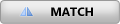
<style>
.page{position:relative;width:120px;height:24px}
.page>*{position:absolute;margin:0}
.t1{font:12px "Ebrima-Bold";color:#000000;text-transform:uppercase}
</style>
<div class="page">
<p class="t1" style="left:51px;top:7px;width:42px;height:9px">Match</p>
</div>
